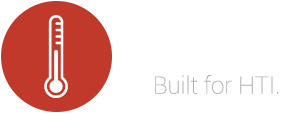
<style>
.page{position:relative;width:304px;height:114px;background:#ffffff}
.page>*{position:absolute;margin:0}
.t1{font:24px "Roboto-Thin";color:#b1b1b1}
</style>
<div class="page">
<p class="t1" style="left:155px;top:75px;width:124px;height:19px">Built for HTI.</p>
</div>
